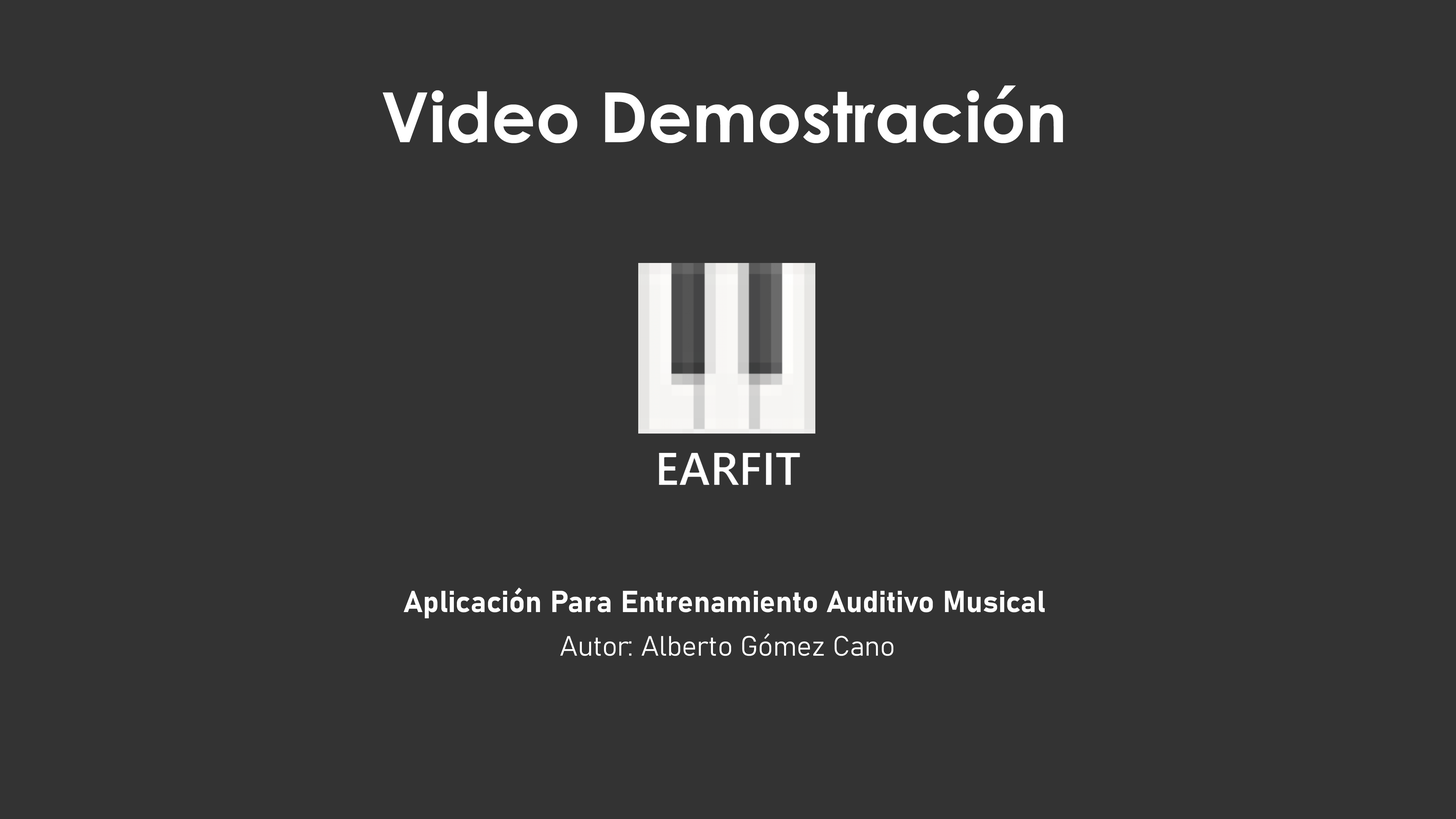
<style>
.page{position:relative;width:1456px;height:819px;background:#333333}
.page>*{position:absolute;margin:0}
.t1{font:69.2px "CenturyGothic-Bold";color:#ffffff}
.t2{font:30px "Bahnschrift-Bold";color:#ffffff}
.t3{font:27.7px "Bahnschrift-Light";color:#ffffff}
</style>
<div class="page">
<p class="t1" style="left:383px;top:85px;width:680px;height:58px">Video Demostración</p>
<p class="t2" style="left:404px;top:587px;width:641px;height:31px">Aplicación Para Entrenamiento Auditivo Musical</p>
<p class="t3" style="left:560px;top:633px;width:334px;height:23px">Autor: Alberto Gómez Cano</p>
</div>
